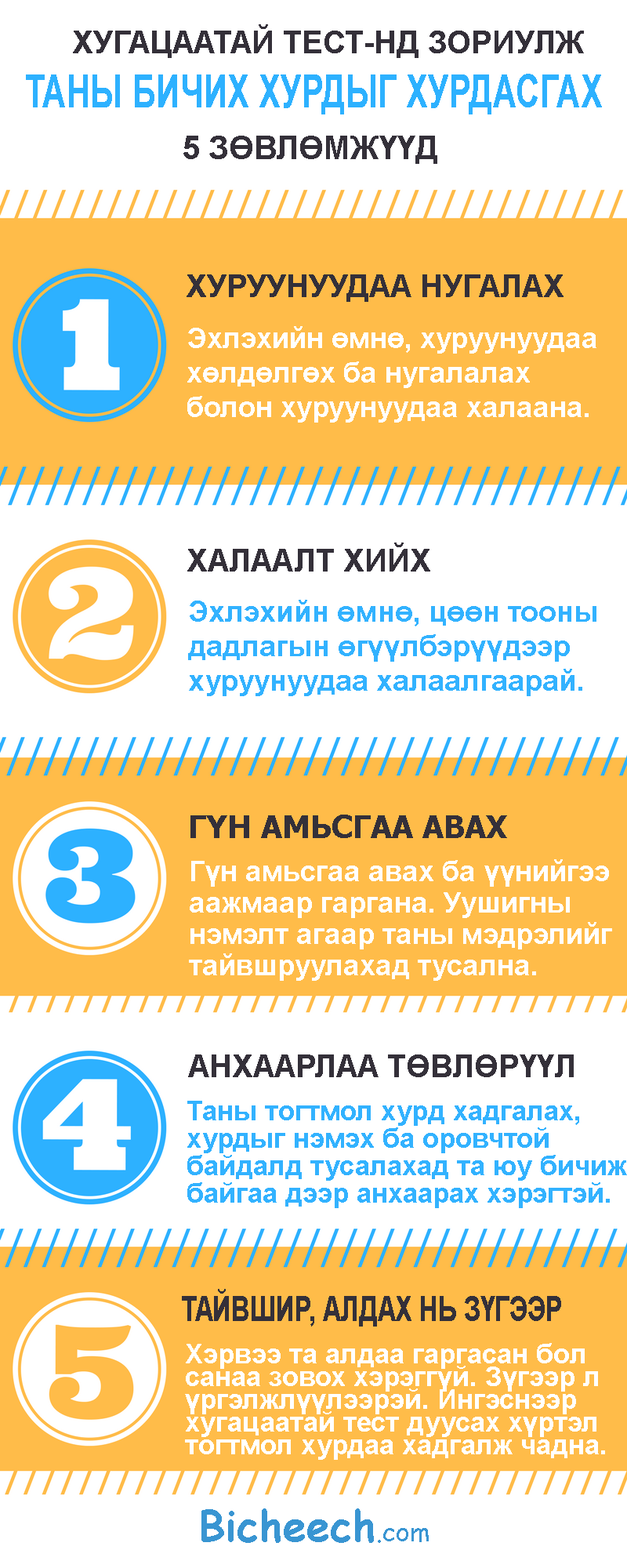
<style>
.page{position:relative;width:627px;height:1568px;background:#ffffff}
.page>*{position:absolute;margin:0}
.t1{font:31.4px "Arial-BoldMT";color:#343039}
.t2{font:45.7px "Arial-BoldMT";color:#2db1ff;scale:0.73 1}
.t3{font:32.1px "Arial-BoldMT";color:#343039}
.t4{font:28.2px/34.5px "Arial-BoldMT";color:#ffffff}
.t5{font:29px/34.5px "Arial-BoldMT";color:#32b2ff}
.t6{font:31.4px "Tahoma-Bold";color:#343039}
.t7{font:28.2px/31.4px "Arial-BoldMT";color:#ffffff}
.t8{font:27.4px/27.4px "Arial-BoldMT";color:#32b2ff}
.t9{font:35.6px "Arial-BoldMT";color:#343039;scale:0.73 1}
.t10{font:27.4px/22.7px "Arial-BoldMT";color:#ffffff}
.t11{font:42.3px "ComicSansMS-Bold";color:#3995d2}
.t12{font:26.7px "ComicSansMS";color:#3995d2}
</style>
<div class="page">
<p class="t1" style="left:73px;top:24px;width:511px;height:34px">ХУГАЦААТАЙ ТЕСТ-НД ЗОРИУЛЖ</p>
<p class="t2" style="left:26px;top:74px;width:576px;height:40px">ТАНЫ БИЧИХ ХУРДЫГ ХУРДАСГАХ</p>
<p class="t3" style="left:183px;top:136px;width:254px;height:28px">5 ЗӨВЛӨМЖҮҮД</p>
<p class="t1" style="left:187px;top:274px;width:377px;height:28px">ХУРУУНУУДАА НУГАЛАХ</p>
<p class="t4" style="left:187px;top:326px;width:410px;height:97px">Эхлэхийн өмнө, хуруунуудаа <br>хөлдөлгөх ба нугалалах <br>болон хуруунуудаа халаана.</p>
<p class="t1" style="left:187px;top:543px;width:243px;height:29px">ХАЛААЛТ ХИЙХ</p>
<p class="t5" style="left:188px;top:600px;width:409px;height:96px">Эхлэхийн өмнө, цөөн тооны <br>дадлагын өгүүлбэрүүдээр <br>хуруунуудаа халаалгаарай.</p>
<p class="t6" style="left:191px;top:815px;width:316px;height:23px">ГҮН АМЬСГАА АВАХ</p>
<p class="t7" style="left:189px;top:859px;width:423px;height:122px">Гүн амьсгаа авах ба үүнийгээ <br>аажмаар гаргана. Уушигны <br>нэмэлт агаар таны мэдрэлийг <br>тайвшруулахад тусална.</p>
<p class="t1" style="left:188px;top:1054px;width:386px;height:23px">АНХААРЛАА ТӨВЛӨРҮҮЛ</p>
<p class="t8" style="left:187px;top:1101px;width:440px;height:107px">Таны тогтмол хурд хадгалах, <br>хурдыг нэмэх ба оровчтой <br>байдалд тусалахад та юу бичиж <br>байгаа дээр анхаарах хэрэгтэй.</p>
<p class="t9" style="left:182px;top:1289px;width:379px;height:38px">ТАЙВШИР, АЛДАХ НЬ ЗҮГЭЭР</p>
<p class="t10" style="left:185px;top:1343px;width:420px;height:117px">Хэрвээ та алдаа гаргасан бол <br>санаа зовох хэрэггүй. Зүгээр л <br>үргэлжлүүлээрэй. Ингэснээр <br>хугацаатай тест дуусах хүртэл <br>тогтмол хурдаа хадгалж чадна.</p>
<p class="t11" style="left:201px;top:1508px;width:228px;height:35px">Bicheech<span class="t12">.com</span></p>
</div>
